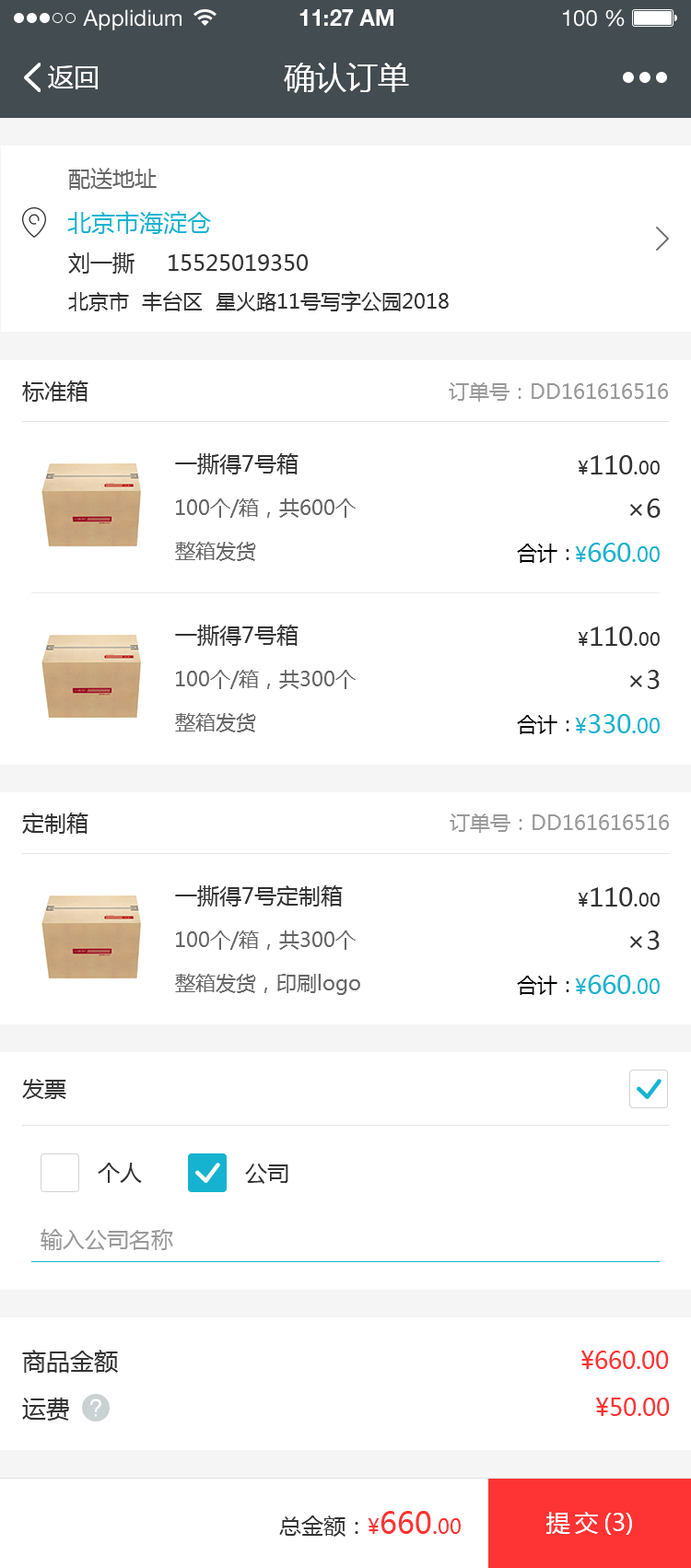
<style>
.page{position:relative;width:691px;height:1568px;background:#ffffff}
.page>*{position:absolute;margin:0}
.t1{font:22.1px "HelveticaNeueLTStd-Roman";color:#ffffff}
.t2{font:22.1px "HelveticaNeueLTStd-Bd";color:#ffffff}
.t3{font:25.8px "MicrosoftYaHei";color:#ffffff}
.t4{font:31.3px "MicrosoftYaHei";color:#ffffff}
.t5{font:22.1px "MicrosoftYaHei";color:#666666}
.t6{font:24px "MicrosoftYaHei";color:#15b4d0}
.t7{font:22.1px "MicrosoftYaHei";color:#333333}
.t8{font:20.3px "MicrosoftYaHei";color:#333333}
.t9{font:20.3px "MicrosoftYaHei";color:#999999}
.t10{font:25.8px "MicrosoftYaHei";color:#333333}
.t11{font:18.4px "MicrosoftYaHei";color:#333333}
.t12{font:20.3px "MicrosoftYaHei";color:#666666}
.t13{font:20.3px "MicrosoftYaHei";color:#000000}
.t14{font:25.8px "MicrosoftYaHei";color:#15b3cf}
.t15{font:20.3px "MicrosoftYaHei";color:#15b3cf}
.t16{font:24px "MicrosoftYaHei";color:#15b3cf}
.t17{font:25.8px "MicrosoftYaHei";color:#15b4d0}
.t18{font:20.3px "MicrosoftYaHei";color:#15b4d0}
.t19{font:22.1px "MicrosoftYaHei";color:#999999}
.t20{font:24px "MicrosoftYaHei";color:#333333}
.t21{font:24px "MicrosoftYaHei";color:#fe3333}
.t22{font:20.3px "MicrosoftYaHei";color:#fe3333}
.t23{font:29.5px "MicrosoftYaHei";color:#fe3333}
.t24{font:24px "MicrosoftYaHei";color:#ffffff}
.t25{font:24px "MicrosoftYaHei";letter-spacing:0.2em;color:#ffffff}
</style>
<div class="page">
<p class="t1" style="left:83px;top:9px;width:98px;height:21px">Applidium</p>
<p class="t2" style="left:299px;top:9px;width:94px;height:17px">11:27 AM</p>
<p class="t1" style="left:563px;top:9px;width:62px;height:18px">100 %</p>
<p class="t3" style="left:48px;top:65px;width:50px;height:24px">返回</p>
<p class="t4" style="left:284px;top:63px;width:125px;height:30px">确认订单</p>
<p class="t5" style="left:68px;top:168px;width:89px;height:22px">配送地址</p>
<p class="t6" style="left:67px;top:211px;width:144px;height:23px">北京市海淀仓</p>
<p class="t7" style="left:68px;top:252px;width:240px;height:22px">刘一撕     15525019350</p>
<p class="t8" style="left:68px;top:291px;width:381px;height:20px">北京市  丰台区  星火路11号写字公园2018</p>
<p class="t7" style="left:22px;top:380px;width:66px;height:22px">标准箱</p>
<p class="t9" style="left:449px;top:382px;width:219px;height:20px">订单号：DD161616516</p>
<p class="t7" style="left:175px;top:453px;width:123px;height:21px">一撕得7号箱</p>
<p class="t10" style="left:578px;top:455px;width:82px;height:19px"><span class="t11">¥</span>110<span class="t7">.</span><span class="t11">00</span></p>
<p class="t12" style="left:176px;top:498px;width:180px;height:20px">100个/箱，共600个</p>
<p class="t10" style="left:630px;top:498px;width:31px;height:20px">×6</p>
<p class="t12" style="left:175px;top:542px;width:81px;height:19px">整箱发货</p>
<p class="t13" style="left:517px;top:544px;width:52px;height:19px">合计：</p>
<p class="t14" style="left:575px;top:543px;width:85px;height:19px"><span class="t15">¥</span>660<span class="t16">.</span><span class="t15">00</span></p>
<p class="t7" style="left:175px;top:625px;width:123px;height:21px">一撕得7号箱</p>
<p class="t10" style="left:578px;top:626px;width:82px;height:20px"><span class="t11">¥</span>110<span class="t7">.</span><span class="t11">00</span></p>
<p class="t12" style="left:176px;top:670px;width:180px;height:19px">100个/箱，共300个</p>
<p class="t10" style="left:630px;top:670px;width:30px;height:19px">×3</p>
<p class="t12" style="left:175px;top:713px;width:81px;height:19px">整箱发货</p>
<p class="t14" style="left:575px;top:714px;width:85px;height:19px"><span class="t15">¥</span>330<span class="t16">.</span><span class="t15">00</span></p>
<p class="t13" style="left:517px;top:715px;width:52px;height:19px">合计：</p>
<p class="t7" style="left:22px;top:813px;width:66px;height:21px">定制箱</p>
<p class="t9" style="left:450px;top:813px;width:219px;height:20px">订单号：DD161616516</p>
<p class="t7" style="left:175px;top:885px;width:168px;height:22px">一撕得7号定制箱</p>
<p class="t10" style="left:578px;top:887px;width:82px;height:20px"><span class="t11">¥</span>110<span class="t7">.</span><span class="t11">00</span></p>
<p class="t12" style="left:176px;top:930px;width:180px;height:20px">100个/箱，共300个</p>
<p class="t10" style="left:630px;top:930px;width:30px;height:20px">×3</p>
<p class="t12" style="left:175px;top:974px;width:185px;height:21px">整箱发货，印刷logo</p>
<p class="t13" style="left:517px;top:976px;width:52px;height:19px">合计：</p>
<p class="t17" style="left:575px;top:975px;width:85px;height:19px"><span class="t18">¥</span>660<span class="t6">.</span><span class="t18">00</span></p>
<p class="t7" style="left:22px;top:1079px;width:44px;height:20px">发票</p>
<p class="t7" style="left:98px;top:1163px;width:44px;height:20px">个人</p>
<p class="t7" style="left:245px;top:1164px;width:43px;height:20px">公司</p>
<p class="t19" style="left:41px;top:1229px;width:132px;height:21px">输入公司名称</p>
<p class="t20" style="left:22px;top:1350px;width:96px;height:23px">商品金额</p>
<p class="t21" style="left:581px;top:1351px;width:88px;height:18px">¥660.00</p>
<p class="t20" style="left:22px;top:1398px;width:47px;height:23px">运费</p>
<p class="t21" style="left:596px;top:1398px;width:74px;height:18px">¥50.00</p>
<p class="t7" style="left:279px;top:1511px;width:182px;height:26px">总金额：<span class="t22">¥</span><span class="t23">660</span><span class="t21">.</span><span class="t22">00</span></p>
<p class="t24" style="left:546px;top:1512px;width:86px;height:23px"><span class="t25">提交</span>(3)</p>
</div>
